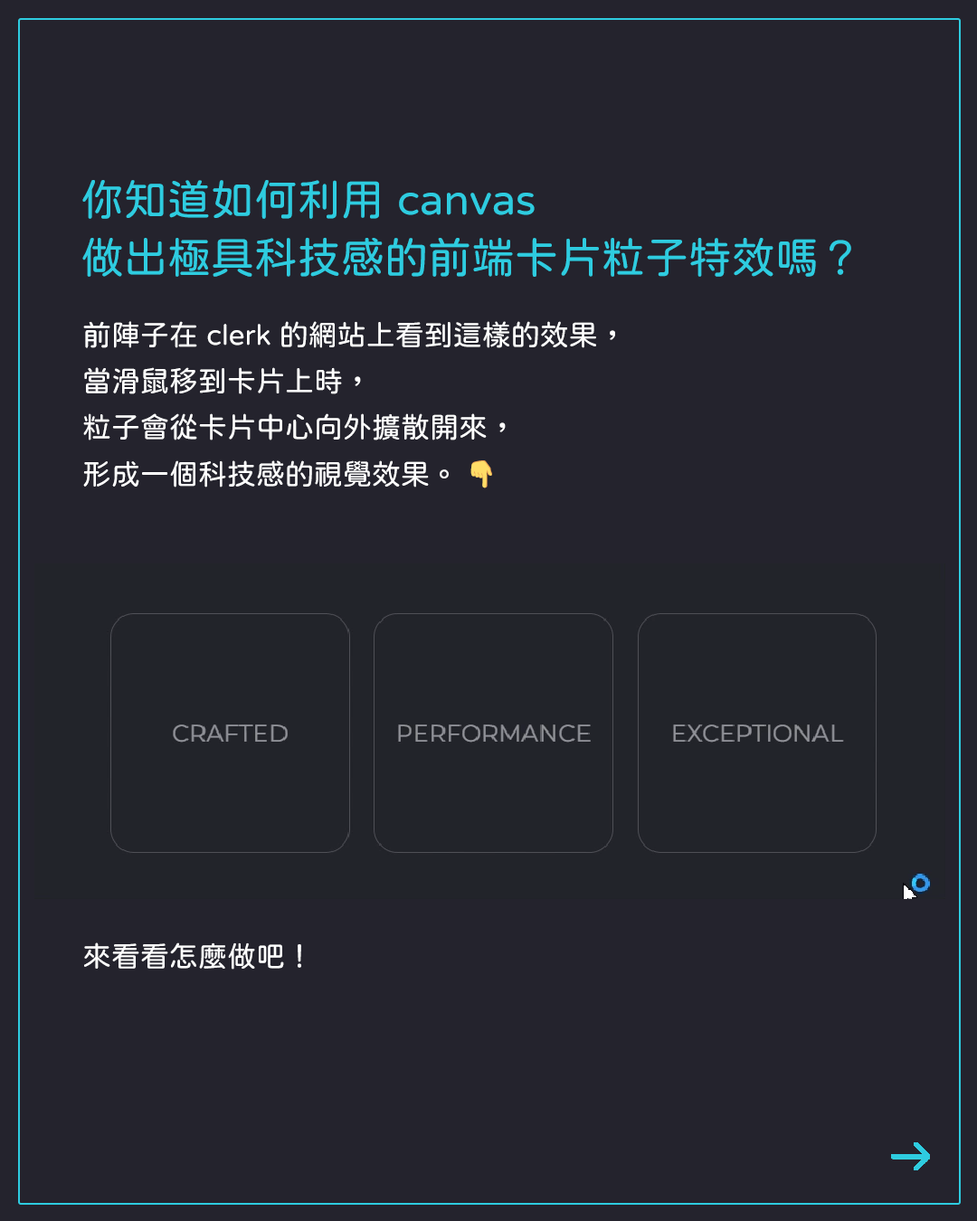
<style>
.page{position:relative;width:977px;height:1221px;background:#24232d}
.page>*{position:absolute;margin:0}
.t1{font:43.4px/57.9px "jf-openhuninn-1.1";color:#2ecce0}
.t2{font:28.9px/46.1px "jf-openhuninn-1.1";color:#ffffff}
.t3{font:28.9px/46.1px "EmojiOneColor";color:#ffffff}
.t4{font:28.9px "jf-openhuninn-1.1";color:#ffffff}
</style>
<div class="page">
<p class="t1" style="left:82px;top:180px;width:769px;height:97px">你知道如何利用 canvas <br>做出極具科技感的前端卡片粒子特效嗎？</p>
<p class="t2" style="left:83px;top:321px;width:532px;height:167px">前陣子在 clerk 的網站上看到這樣的效果，<br>當滑鼠移到卡片上時，<br>粒子會從卡片中心向外擴散開來，<br>形成一個科技感的視覺效果。 <span class="t3">👇</span></p>
<p class="t4" style="left:84px;top:942px;width:217px;height:27px">來看看怎麼做吧！</p>
</div>
